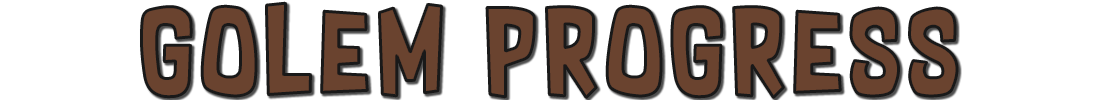
<style>
.page{position:relative;width:1100px;height:100px;background:#ffffff}
.page>*{position:absolute;margin:0}
.t1{font:100px "SupersonicRocketship";letter-spacing:0.075em;color:#6a432f}
</style>
<div class="page">
<p class="t1" style="left:141px;top:3px;width:816px;height:95px">golem progress</p>
</div>
